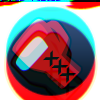
<style>
.page{position:relative;width:100px;height:100px}
.page>*{position:absolute;margin:0}
.t1{font:14.1px "Amble-Bold";scale:1.74 1}
</style>
<div class="page">
<p class="t1" style="left:43px;top:48px;width:17px;height:17px;rotate:-45deg">X</p>
</div>
